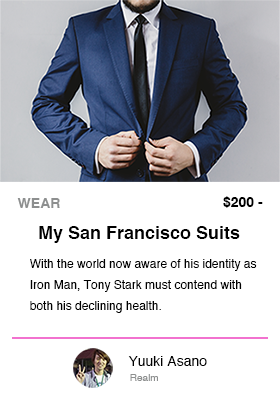
<style>
.page{position:relative;width:280px;height:400px;background:#ffffff}
.page>*{position:absolute;margin:0}
.t1{font:14px "Helvetica-Bold";color:#8d8f8f}
.t2{font:14px "Helvetica-Bold";color:#000000}
.t3{font:18px "Helvetica-Bold";color:#000000}
.t4{font:12px "Helvetica";color:#000000}
.t5{font:14px "Helvetica";color:#000000}
.t6{font:10px "Helvetica";color:#8d8f8f}
</style>
<div class="page">
<p class="t1" style="left:17px;top:198px;width:43px;height:10px">WEAR</p>
<p class="t2" style="left:223px;top:196px;width:40px;height:12px">$200 -</p>
<p class="t3" style="left:39px;top:226px;width:201px;height:17px">My San Francisco Suits</p>
<p class="t4" style="left:30px;top:259px;width:227px;height:54px">With the world now aware of his identity as Iron Man, Tony Stark must contend with both his declining health.</p>
<p class="t5" style="left:128px;top:356px;width:79px;height:10px">Yuuki Asano</p>
<p class="t6" style="left:130px;top:374px;width:28px;height:7px">Realm</p>
</div>
